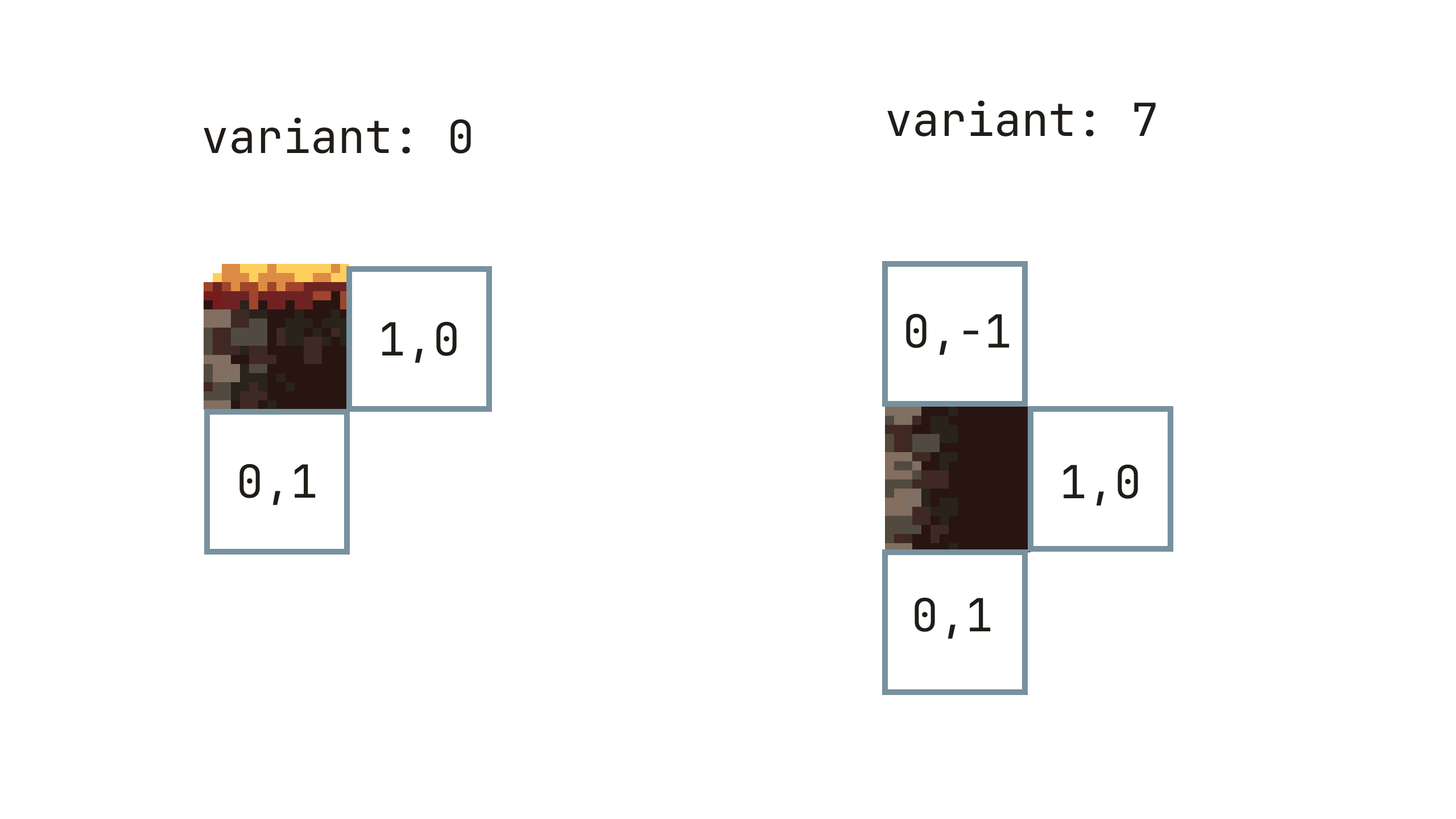
<style>
.page{position:relative;width:1456px;height:819px;background:#ffffff}
.page>*{position:absolute;margin:0}
.t1{font:45.5px "JetBrainsMono-Regular";color:#201c18}
</style>
<div class="page">
<p class="t1" style="left:887px;top:100px;width:269px;height:36px">variant: 7</p>
<p class="t1" style="left:204px;top:117px;width:267px;height:37px">variant: 0</p>
<p class="t1" style="left:906px;top:313px;width:104px;height:42px">0,-1</p>
<p class="t1" style="left:382px;top:321px;width:75px;height:42px">1,0</p>
<p class="t1" style="left:239px;top:464px;width:77px;height:41px">0,1</p>
<p class="t1" style="left:1064px;top:464px;width:74px;height:42px">1,0</p>
<p class="t1" style="left:915px;top:597px;width:76px;height:42px">0,1</p>
</div>
